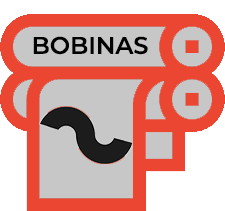
<style>
.page{position:relative;width:225px;height:211px;background:#c7c7c7}
.page>*{position:absolute;margin:0}
.t1{font:24px "Montserrat-SemiBold";color:#010101}
</style>
<div class="page">
<p class="t1" style="left:33px;top:36px;width:115px;height:19px">BOBINAS</p>
</div>
